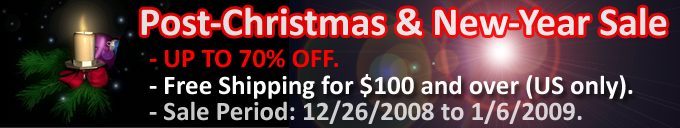
<style>
.page{position:relative;width:680px;height:128px}
.page>*{position:absolute;margin:0}
.t1{font:40px "Calibri-Bold";color:#e4e4e6}
.t2{font:27px "Calibri-Bold";color:#ff0000}
.t3{font:27px "Calibri-Bold";color:#fcfcfd}
.t4{font:27px "Calibri-Bold";color:#d1d1d2}
</style>
<div class="page">
<p class="t1" style="left:141px;top:7px;width:526px;height:29px">Post-Christmas &amp; New-Year Sale</p>
<p class="t2" style="left:149px;top:49px;width:189px;height:19px">- UP TO 70% OFF.</p>
<p class="t3" style="left:149px;top:74px;width:484px;height:25px">- Free Shipping for $100 and over (US only).</p>
<p class="t4" style="left:149px;top:100px;width:433px;height:24px">- Sale Period: 12/26/2008 to 1/6/2009.</p>
</div>
